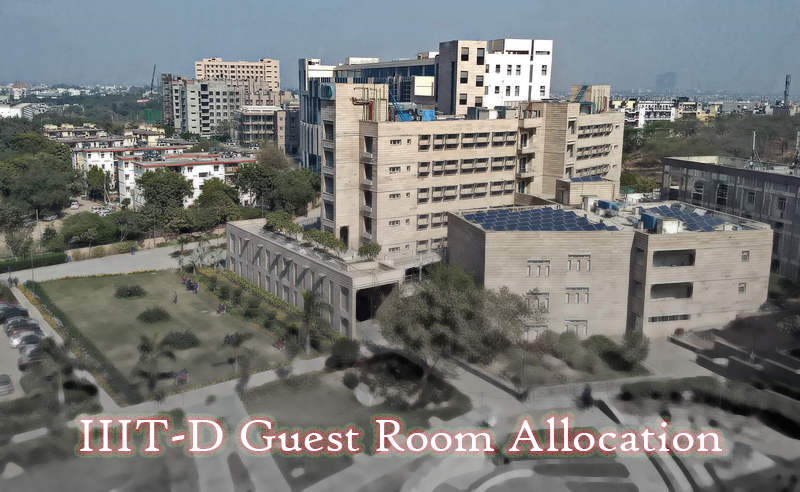
<style>
.page{position:relative;width:800px;height:492px}
.page>*{position:absolute;margin:0}
.t1{font:49px "HighTowerText-Reg";color:#ffffff}
</style>
<div class="page">
<p class="t1" style="left:80px;top:417px;width:643px;height:34px">IIIT-D Guest Room Allocation</p>
</div>
